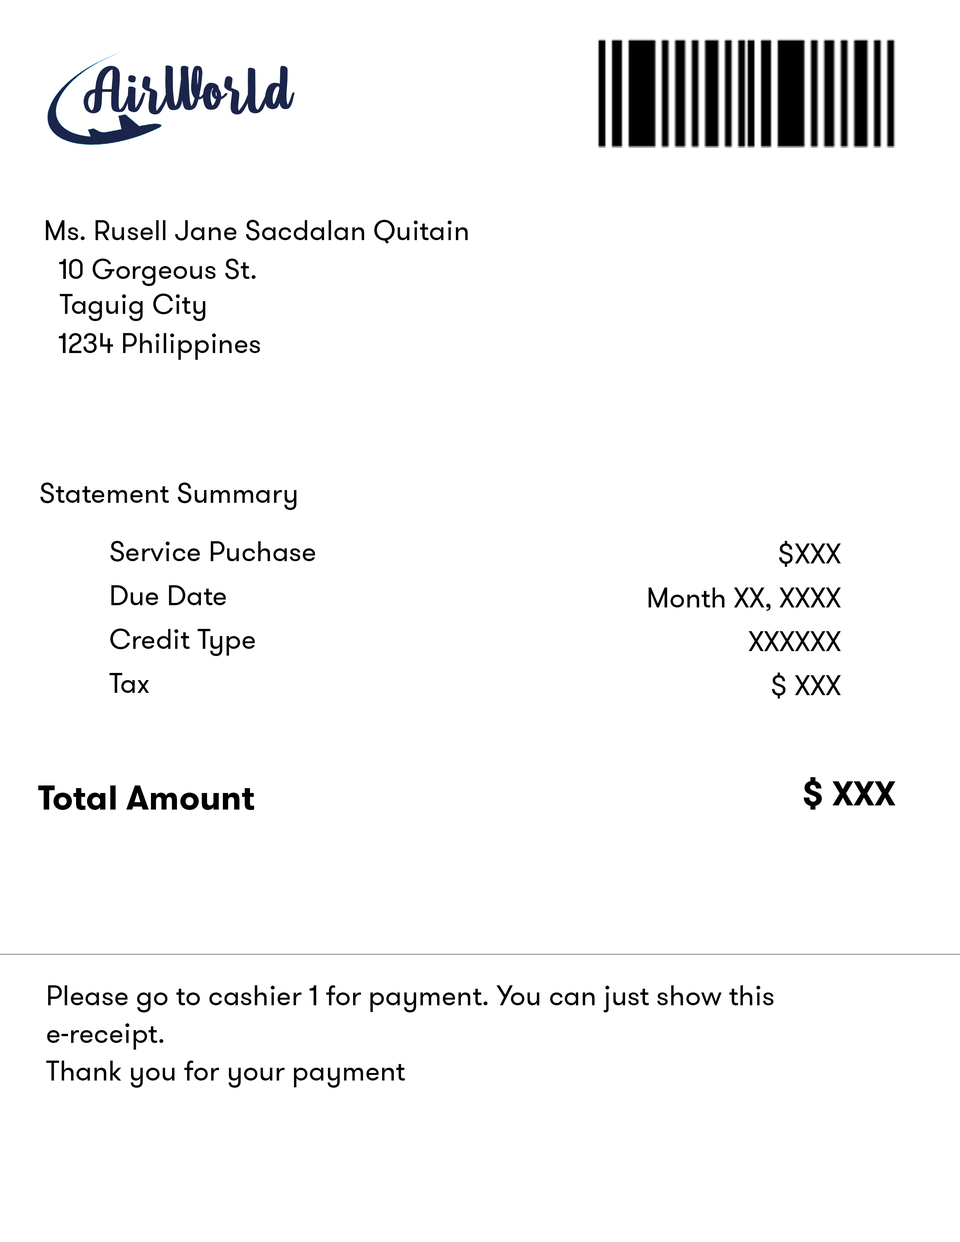
<style>
.page{position:relative;width:960px;height:1242px;background:#ffffff}
.page>*{position:absolute;margin:0}
.t1{font:28.2px "GTWalsheim";color:#000000}
.t2{font:28.2px/43.9px "GTWalsheim";color:#000000}
.t3{font:34.5px "GTWalsheim-Bold";color:#000000}
.t4{font:28.2px/37.6px "GTWalsheim";color:#000000}
</style>
<div class="page">
<p class="t1" style="left:46px;top:220px;width:422px;height:24px">Ms. Rusell Jane Sacdalan Quitain</p>
<p class="t1" style="left:59px;top:259px;width:197px;height:27px">10 Gorgeous St.</p>
<p class="t1" style="left:59px;top:294px;width:147px;height:27px">Taguig City</p>
<p class="t1" style="left:59px;top:333px;width:201px;height:27px">1234 Philippines</p>
<p class="t1" style="left:40px;top:483px;width:257px;height:27px">Statement Summary</p>
<p class="t2" style="left:109px;top:541px;width:206px;height:152px">Service Puchase<br>Due Date<br>Credit Type<br>Tax</p>
<p class="t2" style="left:648px;top:541px;width:193px;height:158px;text-align:right">$XXX<br>Month XX, XXXX<br>XXXXXX<br>$ XXX</p>
<p class="t3" style="left:38px;top:786px;width:216px;height:24px">Total Amount</p>
<p class="t3" style="left:804px;top:777px;width:92px;height:33px">$ XXX</p>
<p class="t4" style="left:46px;top:986px;width:728px;height:102px">Please go to cashier 1 for payment. You can just show this<br>e-receipt.<br>Thank you for your payment</p>
</div>
